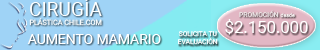
<style>
.page{position:relative;width:320px;height:50px;background:#9fd3f6}
.page>*{position:absolute;margin:0}
.t1{font:7.2px "Roboto-Regular";color:#fdffff}
.t2{font:19.2px "Roboto-Regular";color:#fdffff}
.t3{font:6.8px "Roboto-Regular";color:#f0eaea}
.t4{font:5.3px "Roboto-Regular";color:#f0eaea}
.t5{font:16.7px "Roboto-Regular";color:#ffffff}
.t6{font:13.9px "Roboto-Regular";color:#ffffff}
.t7{font:6.8px "Roboto-Regular";letter-spacing:-0.01em;color:#ffffff}
</style>
<div class="page">
<p class="t1" style="left:29px;top:0px;width:73px;height:26px;text-align:center"><span class="t2">CIRUGÍA<br></span>PLÁSTICA CHILE.COM</p>
<p class="t3" style="left:239px;top:10px;width:56px;height:8px">PROMOCIÓN <span class="t4">desde</span></p>
<p class="t5" style="left:225px;top:19px;width:83px;height:16px">$2.150.000</p>
<p class="t6" style="left:27px;top:34px;width:134px;height:10px">AUMENTO MAMARIO</p>
<p class="t7" style="left:178px;top:31px;width:40px;height:14px;text-align:center">SOLICITA TU<br>EVALUACIÓN</p>
</div>
